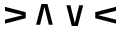
<style>
.page{position:relative;width:120px;height:30px;background:#ffffff}
.page>*{position:absolute;margin:0}
.t1{font:30px "CascadiaMonoRoman-Bold";color:#000000;font-style:italic}
</style>
<div class="page">
<p class="t1" style="left:5px;top:6px;width:21px;height:18px;rotate:-90deg">V</p>
<p class="t1" style="left:36px;top:4px;width:17px;height:21px;rotate:-180deg">V</p>
<p class="t1" style="left:66px;top:5px;width:18px;height:21px">V</p>
<p class="t1" style="left:95px;top:6px;width:21px;height:18px;rotate:-90deg">V</p>
</div>
